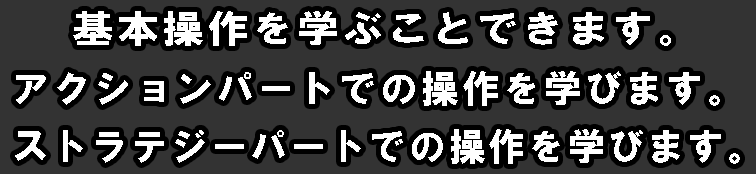
<style>
.page{position:relative;width:756px;height:174px;background:#333333}
.page>*{position:absolute;margin:0}
.t1{font:37.5px "HGSSoeiKakugothicUB";letter-spacing:0.08em;color:#ffffff;scale:1.11 1}
.t2{font:37.5px "HGSSoeiKakugothicUB";letter-spacing:0.08em;color:#ffffff}
.t3{font:37.5px "HGSSoeiKakugothicUB";letter-spacing:0.075em;color:#ffffff}
</style>
<div class="page">
<p class="t1" style="left:73px;top:11px;width:598px;height:35px">基本操作を学ぶことできます。</p>
<p class="t2" style="left:16px;top:71px;width:704px;height:35px">アクションパートでの操作を学びます。</p>
<p class="t3" style="left:15px;top:129px;width:725px;height:35px">ストラテジーパートでの操作を学びます。</p>
</div>
